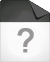
<style>
.page{position:relative;width:50px;height:62px;background:#fafafa}
.page>*{position:absolute;margin:0}
.t1{font:32.9px "ArialMT";color:#989696;font-weight:bold}
</style>
<div class="page">
<p class="t1" style="left:17px;top:28px;width:17px;height:25px">?</p>
</div>
